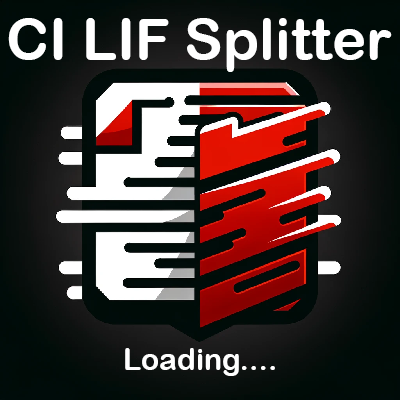
<style>
.page{position:relative;width:400px;height:400px}
.page>*{position:absolute;margin:0}
.t1{font:58px "ArialRoundedMTBold";color:#ffffff}
.t2{font:30px "ArialRoundedMTBold";color:#ffffff}
</style>
<div class="page">
<p class="t1" style="left:8px;top:18px;width:384px;height:54px">CI LIF Splitter</p>
<p class="t2" style="left:125px;top:348px;width:150px;height:28px">Loading....</p>
</div>
